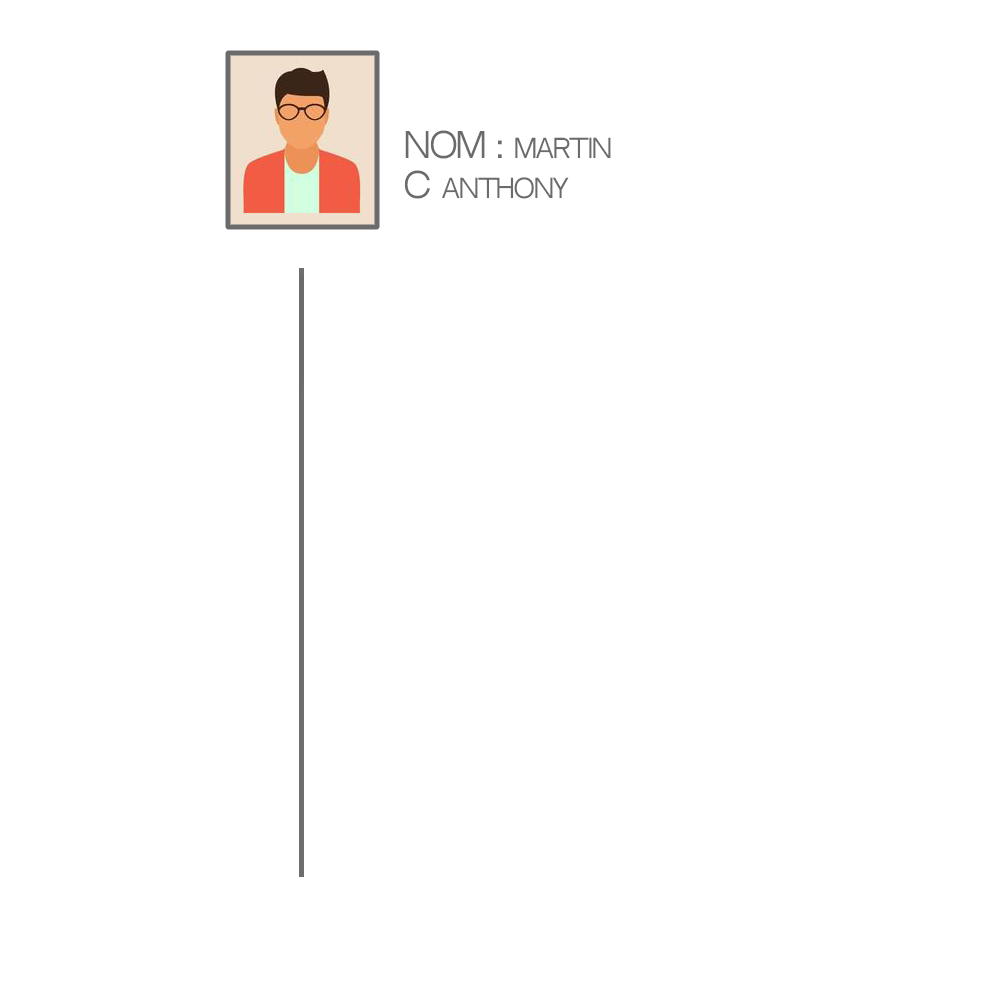
<style>
.page{position:relative;width:1000px;height:1000px;background:#ffffff}
.page>*{position:absolute;margin:0}
.t1{font:25px "NeutralFaceRegular";letter-spacing:-0.025em;color:#6b6b6b}
.t2{font:33.3px "NeutralFaceRegular";letter-spacing:-0.025em;color:#6b6b6b}
</style>
<div class="page">
<p class="t1" style="left:404px;top:130px;width:207px;height:69px"><span class="t2">Nom : </span>Martin<br><span class="t2">c </span>Anthony</p>
</div>
